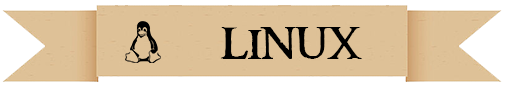
<style>
.page{position:relative;width:511px;height:87px;background:#dec197}
.page>*{position:absolute;margin:0}
.t1{font:51px "RingbearerMedium";color:#000000}
</style>
<div class="page">
<p class="t1" style="left:220px;top:27px;width:142px;height:32px">linux</p>
</div>
